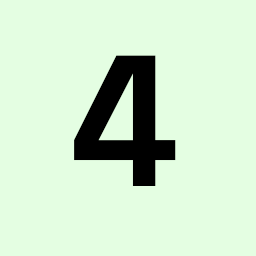
<style>
.page{position:relative;width:256px;height:256px;background:#e4fee2}
.page>*{position:absolute;margin:0}
.t1{font:153.3px "BMDoHyeon";color:#000000}
</style>
<div class="page">
<p class="t1" style="left:74px;top:55px;width:102px;height:131px">4</p>
</div>
